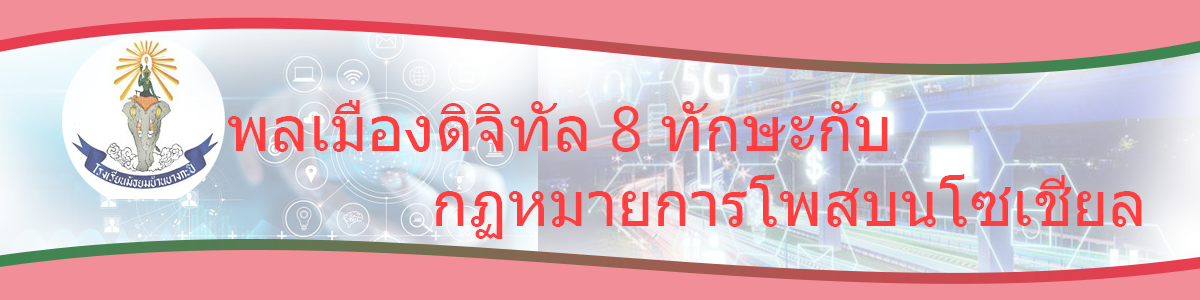
<style>
.page{position:relative;width:1200px;height:300px;background:#f18e97}
.page>*{position:absolute;margin:0}
.t1{font:62.5px "Tahoma";color:#ff3f3f}
.t2{font:62.5px "SegoeUIEmoji";color:#ff3f3f}
</style>
<div class="page">
<p class="t1" style="left:227px;top:100px;width:915px;height:139px">พลเมืองดิจิทัล<span class="t2"> 8 </span>ทักษะกับ<br>            กฏหมายการโพสบนโซเชียล</p>
</div>
